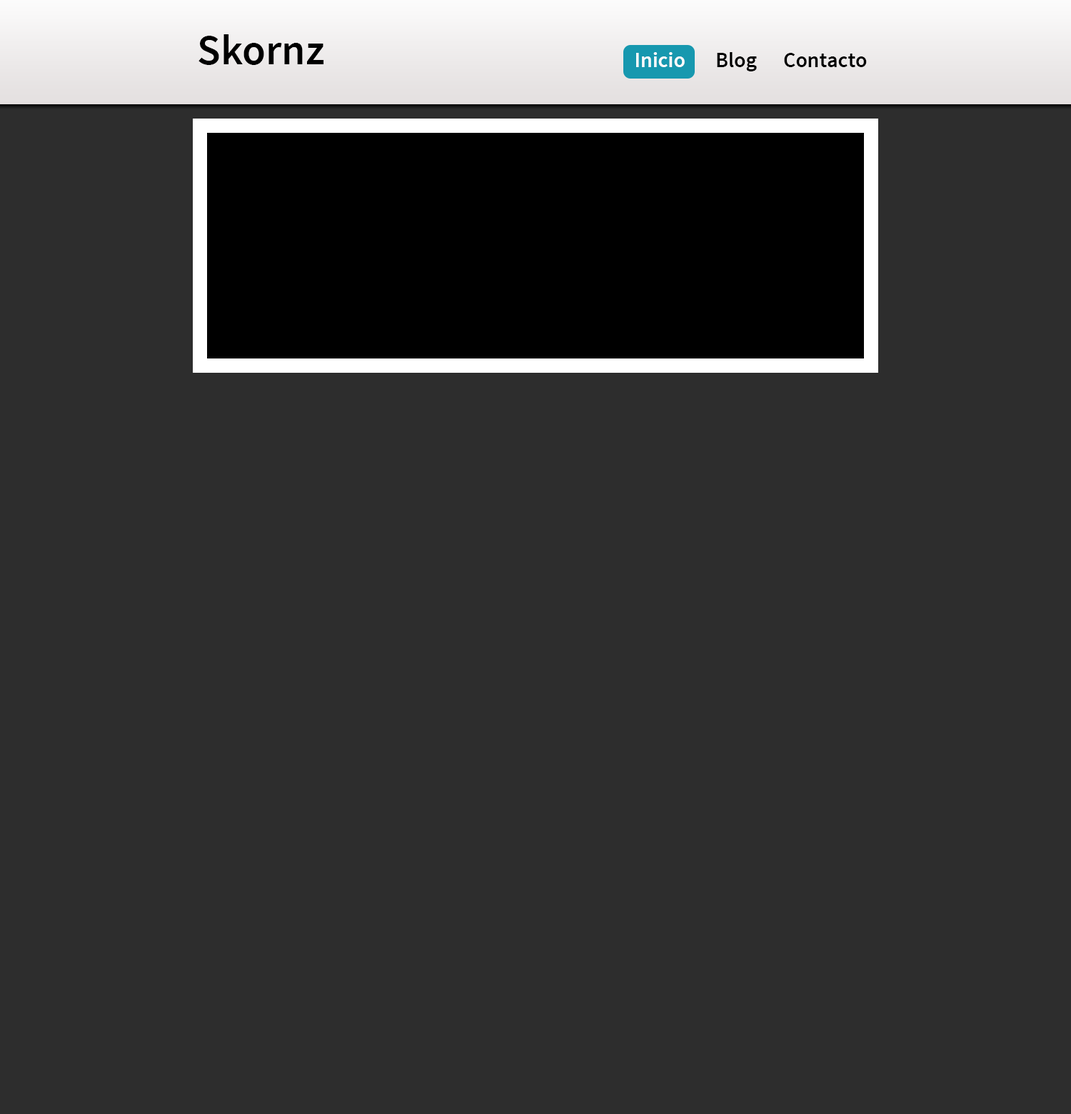
<style>
.page{position:relative;width:1071px;height:1114px;background:#2d2d2d}
.page>*{position:absolute;margin:0}
.t1{font:42.8px "SourceSansPro-Semibold";color:#000000}
.t2{font:21.4px "SourceSansPro-Semibold";color:#fdfcfc}
.t3{font:21.4px "SourceSansPro-Semibold";color:#000000}
</style>
<div class="page">
<p class="t1" style="left:198px;top:34px;width:126px;height:31px">Skornz</p>
<p class="t2" style="left:636px;top:52px;width:49px;height:15px">Inicio</p>
<p class="t3" style="left:717px;top:52px;width:40px;height:19px">Blog</p>
<p class="t3" style="left:784px;top:53px;width:83px;height:14px">Contacto</p>
</div>
